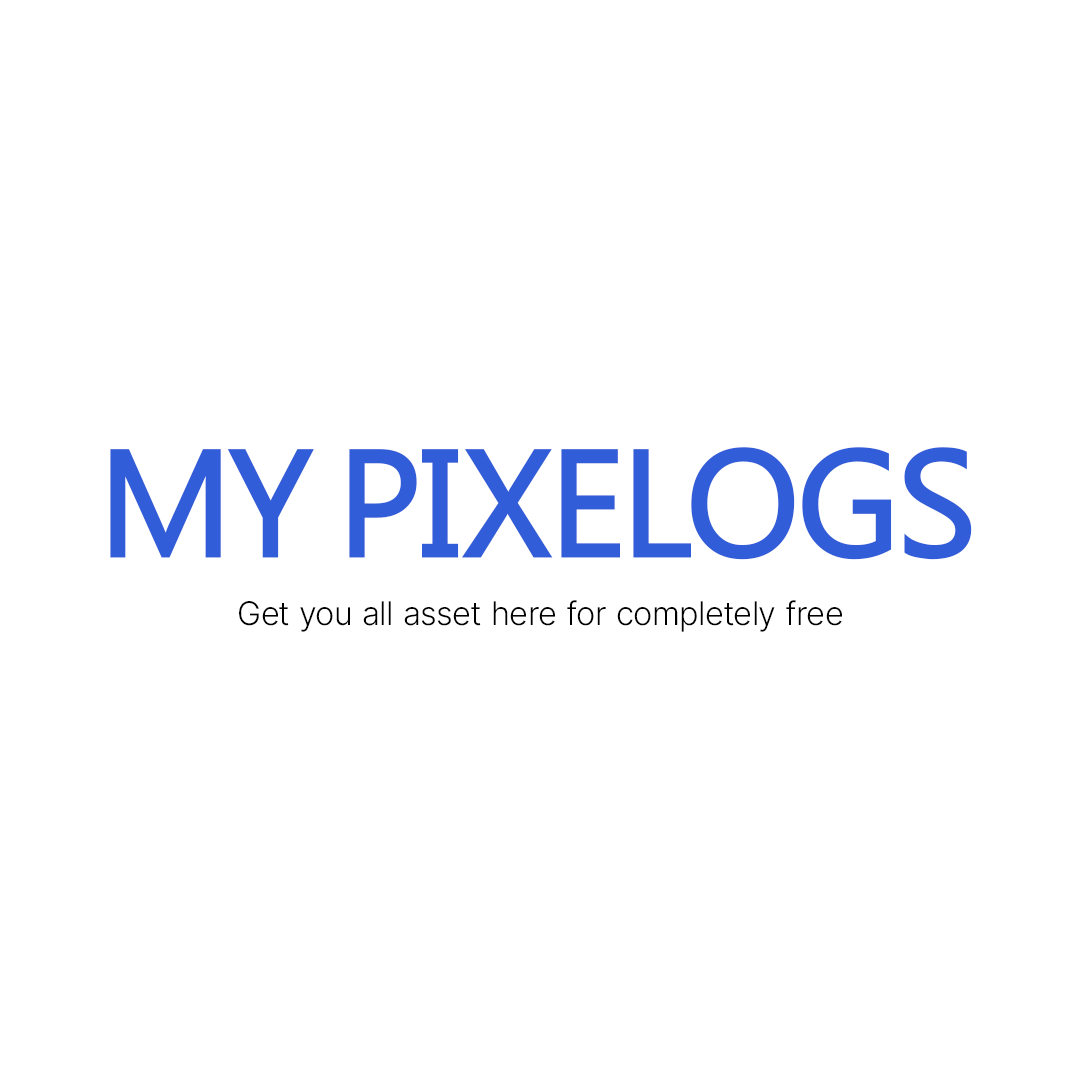
<style>
.page{position:relative;width:1080px;height:1080px;background:#ffffff}
.page>*{position:absolute;margin:0}
.t1{font:143.6px "Annamayya-Bold";color:#325dd8}
.t2{font:32.5px "Inter-Light";color:#000000}
</style>
<div class="page">
<p class="t1" style="left:110px;top:447px;width:862px;height:113px">MY PIXELOGS</p>
<p class="t2" style="left:239px;top:600px;width:603px;height:32px">Get you all asset here for completely free</p>
</div>
